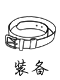
<style>
.page{position:relative;width:60px;height:80px;background:#ffffff}
.page>*{position:absolute;margin:0}
.t1{font:18px "STXingkaiSC-Light";letter-spacing:0.055em;color:#000000}
</style>
<div class="page">
<p class="t1" style="left:14px;top:59px;width:35px;height:17px">装备</p>
</div>
